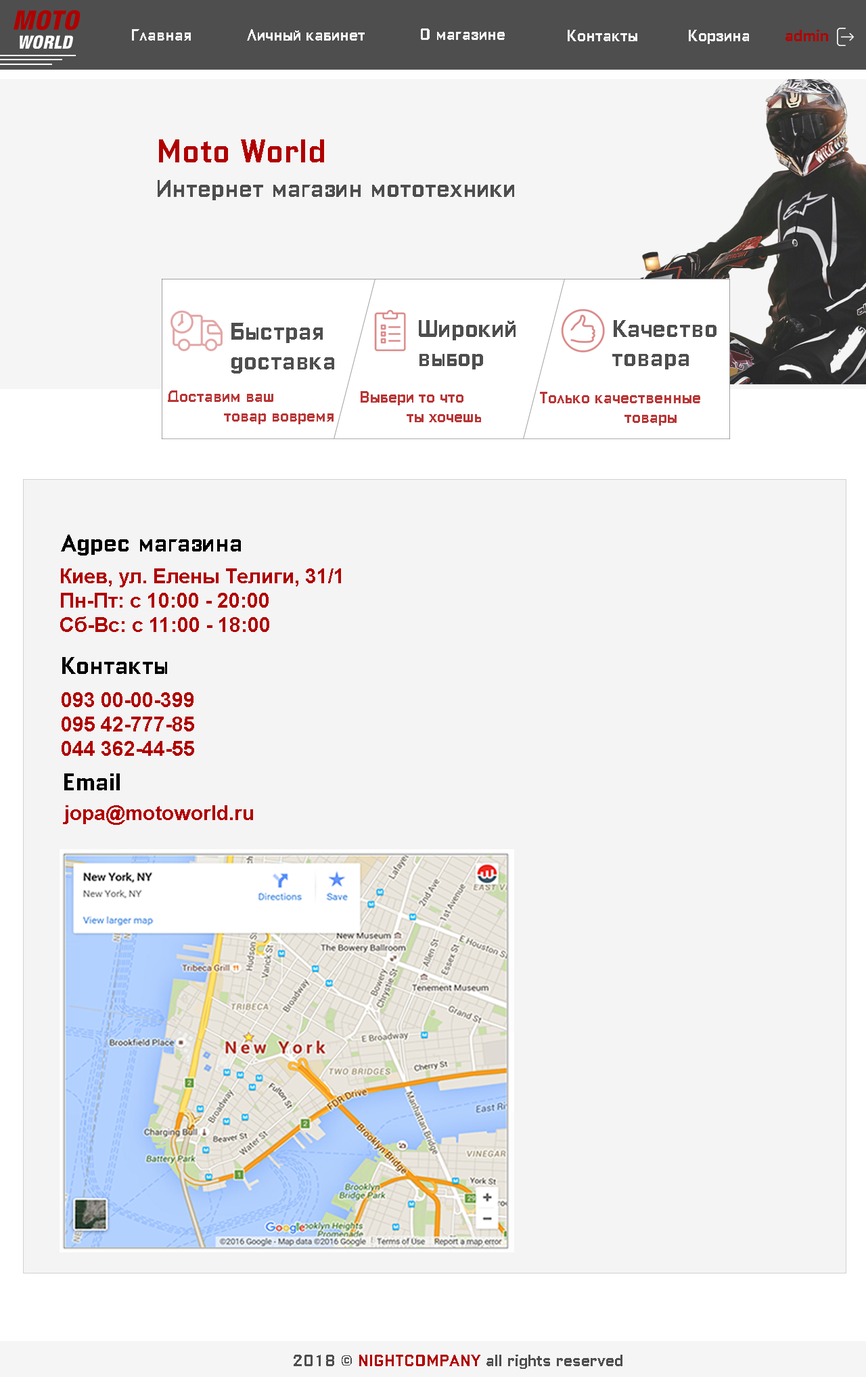
<style>
.page{position:relative;width:866px;height:1377px;background:#f4f4f4}
.page>*{position:absolute;margin:0}
.t1{font:16.2px "ColumbiaPrintCyrillic";color:#f4f4f4}
.t2{font:16.2px "ColumbiaPrintCyrillic";color:#b00000}
.t3{font:32.5px "ColumbiaPrintCyrillic";color:#b00000}
.t4{font:24.4px "ColumbiaPrintCyrillic";color:#4e4e4e}
.t5{font:24.3px "ColumbiaPrintCyrillic";color:#4e4e4e}
.t6{font:16.2px "ColumbiaPrintCyrillic";color:#b83737}
.t7{font:24.4px "ColumbiaPrintCyrillic";color:#000000}
.t8{font:20.3px "Arial-BoldMT";color:#b00000}
.t9{font:16.2px "ColumbiaPrintCyrillic";color:#4e4e4e}
</style>
<div class="page">
<p class="t1" style="left:132px;top:29px;width:59px;height:12px">Главная</p>
<p class="t1" style="left:247px;top:29px;width:118px;height:12px">Личный кабинет</p>
<p class="t1" style="left:421px;top:28px;width:84px;height:12px">О магазине</p>
<p class="t1" style="left:568px;top:30px;width:69px;height:11px">Контакты</p>
<p class="t1" style="left:689px;top:30px;width:60px;height:14px">Корзина</p>
<p class="t2" style="left:786px;top:30px;width:42px;height:11px">admin</p>
<p class="t3" style="left:159px;top:139px;width:165px;height:23px">Moto World</p>
<p class="t4" style="left:158px;top:180px;width:356px;height:20px">Интернет магазин мототехники</p>
<p class="t5" style="left:231px;top:323px;width:103px;height:50px">Быстрая<br>доставка</p>
<p class="t5" style="left:419px;top:320px;width:97px;height:49px">Широкий <br>выбор</p>
<p class="t5" style="left:612px;top:320px;width:105px;height:49px">Качество товара</p>
<p class="t6" style="left:168px;top:390px;width:166px;height:34px">Доставим ваш <br>            товар вовремя</p>
<p class="t6" style="left:361px;top:391px;width:120px;height:31px">Выбери то что <br>          ты хочешь</p>
<p class="t6" style="left:540px;top:392px;width:160px;height:34px">Только качественные <br>                  товары</p>
<p class="t7" style="left:61px;top:535px;width:180px;height:20px">Адрес магазина</p>
<p class="t8" style="left:60px;top:568px;width:281px;height:64px">Киев, ул. Елены Телиги, 31/1<br>Пн-Пт: с 10:00 - 20:00<br>Сб-Вс: с 11:00 - 18:00</p>
<p class="t7" style="left:62px;top:657px;width:105px;height:17px">Контакты</p>
<p class="t8" style="left:62px;top:692px;width:132px;height:64px">093 00-00-399<br>095 42-777-85<br>044 362-44-55</p>
<p class="t7" style="left:64px;top:773px;width:56px;height:17px">Email</p>
<p class="t8" style="left:63px;top:805px;width:190px;height:20px">jopa@motoworld.ru</p>
<p class="t9" style="left:294px;top:1355px;width:328px;height:14px">2018 © <span class="t2">NIGHTCOMPANY </span>all rights reserved</p>
</div>
